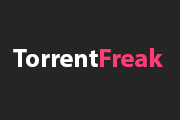
<style>
.page{position:relative;width:180px;height:120px;background:#252525}
.page>*{position:absolute;margin:0}
.t1{font:26px "MyriadPro-Bold";color:#ffffff}
.t2{font:26px "MyriadPro-Bold";color:#ff3c78}
</style>
<div class="page">
<p class="t1" style="left:13px;top:48px;width:150px;height:19px">Torrent<span class="t2">Freak</span></p>
</div>
